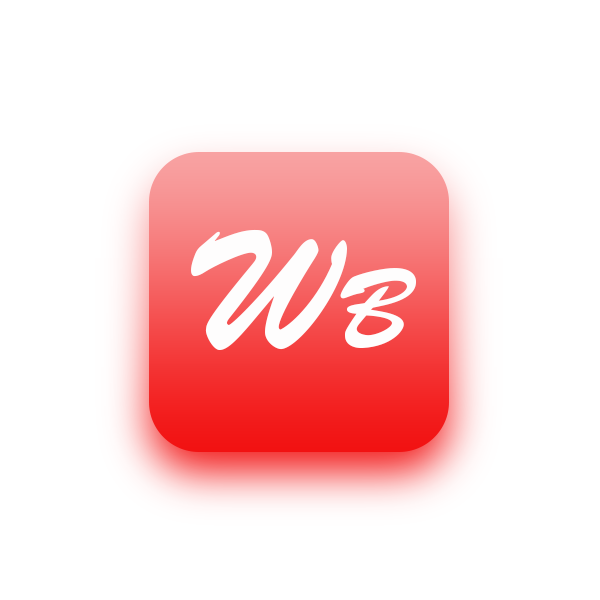
<style>
.page{position:relative;width:600px;height:600px;background:#ffffff}
.page>*{position:absolute;margin:0}
.t1{font:170.3px "BrushScriptStd";color:#fefdfd;scale:0.91 1}
.t2{font:113.5px "BrushScriptStd";color:#fefdfd;scale:0.91 1}
</style>
<div class="page">
<p class="t1" style="left:191px;top:229px;width:225px;height:121px">W<span class="t2">B</span></p>
</div>
